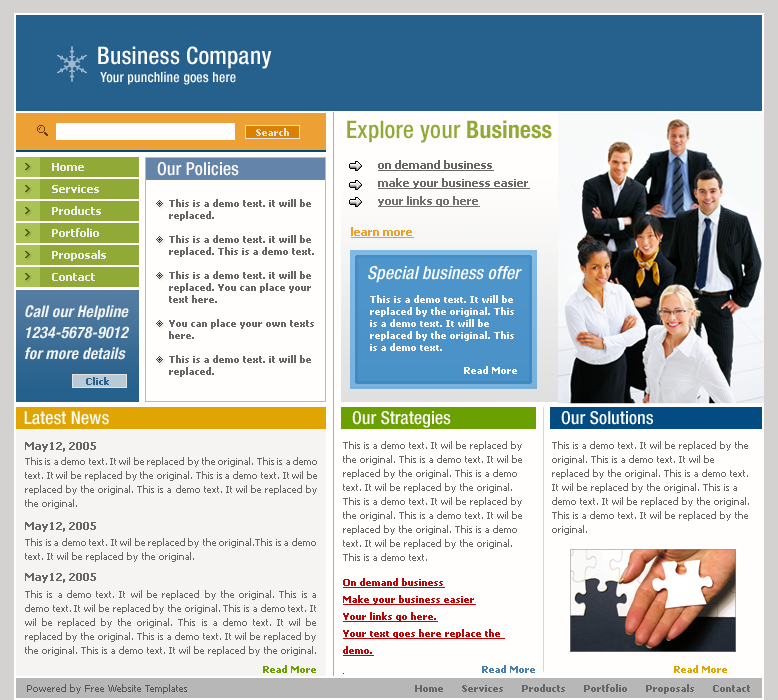
<style>
.page{position:relative;width:778px;height:700px;background:#fffefd}
.page>*{position:absolute;margin:0}
.t1{font:14px/18px "HelveticaNeue-MediumCond";color:#fffefd}
.t2{font:24px/18px "HelveticaNeue-MediumCond";color:#fffefd}
.t3{font:24px "HelveticaNeue-MediumCond";color:#91aa37}
.t4{font:24px "HelveticaNeue-BoldCond";color:#91aa37}
.t5{font:9px "Tahoma-Bold";color:#e5e4e2}
.t6{font:11px/18px "Tahoma-Bold";color:#666666;text-decoration:underline}
.t7{font:11px/22px "Tahoma-Bold";color:#efeeed}
.t8{font:18px "HelveticaNeue-MediumCond";color:#fefcfb}
.t9{font:10px/12px "Tahoma-Bold";color:#666666}
.t10{font:11px "Tahoma-Bold";color:#f09d27;text-decoration:underline}
.t11{font:18px "HelveticaNeue-MediumCondObl";color:#fffefe}
.t12{font:16px/21px "HelveticaNeue-BoldCondObl";color:#f0f2f4}
.t13{font:9px/12px "Tahoma-Bold";color:#f5f5f5}
.t14{font:10px "Tahoma-Bold";color:#fdfeff}
.t15{font:9px "Tahoma-Bold";color:#26618d}
.t16{font:18px "HelveticaNeue-MediumCond";color:#fdfcf8}
.t17{font:11px "Tahoma-Bold";color:#666666}
.t18{font:10px/14px "Tahoma";color:#666666}
.t19{font:9px/17px "Tahoma-Bold";color:#be0404;text-decoration:underline}
.t20{font:10px "Tahoma-Bold";color:#6aa100}
.t21{font:10px "Tahoma-Bold";color:#4880ab}
.t22{font:10px "Tahoma-Bold";color:#e0a403}
.t23{font:10px "Tahoma";color:#575656}
.t24{font:10px "Tahoma-Bold";color:#666666}
</style>
<div class="page">
<p class="t1" style="left:98px;top:46px;width:174px;height:39px"><span class="t2">Business Company<br></span> Your punchline goes here</p>
<p class="t3" style="left:347px;top:120px;width:205px;height:23px">Explore your <span class="t4">Business</span></p>
<p class="t5" style="left:256px;top:128px;width:33px;height:8px">Search</p>
<p class="t6" style="left:378px;top:160px;width:152px;height:47px">on demand business<br>make your business easier<br>your links go here</p>
<p class="t7" style="left:52px;top:163px;width:54px;height:118px">Home<br>Services <br>Products <br>Portfolio<br>Proposals<br>Contact</p>
<p class="t8" style="left:157px;top:162px;width:82px;height:14px">Our Policies</p>
<p class="t9" style="left:169px;top:199px;width:145px;height:178px">This is a demo text. it will be <br>replaced.<br><br>This is a demo text. it will be <br>replaced. This is a demo text.<br><br>This is a demo text. it will be <br>replaced. You can place your <br>text here.<br><br>You can place your own texts <br>here.<br><br>This is a demo text. it will be <br>replaced.</p>
<p class="t10" style="left:351px;top:227px;width:63px;height:11px">learn more</p>
<p class="t11" style="left:368px;top:266px;width:154px;height:17px">Special business offer</p>
<p class="t12" style="left:25px;top:305px;width:104px;height:55px">Call our Helpline<br>1234-5678-9012<br>for more details</p>
<p class="t13" style="left:370px;top:295px;width:144px;height:56px">This is a demo text. It will be replaced by the original. This is a demo text. It will be replaced by the original. This is a demo text.</p>
<p class="t14" style="left:464px;top:366px;width:53px;height:8px">Read More</p>
<p class="t15" style="left:86px;top:377px;width:23px;height:8px">Click</p>
<p class="t16" style="left:24px;top:411px;width:85px;height:14px">Latest News</p>
<p class="t16" style="left:352px;top:411px;width:99px;height:17px">Our Strategies</p>
<p class="t16" style="left:561px;top:411px;width:92px;height:14px">Our Solutions</p>
<p class="t17" style="left:25px;top:442px;width:71px;height:10px">May12, 2005</p>
<p class="t18" style="left:343px;top:441px;width:179px;height:120px">This is a demo text. It wil be replaced by the original. This is a demo text. It wil be replaced by the original. This is a demo text. It wil be replaced by the original. This is a demo text. It wil be replaced by the original. This is a demo text. It wil be replaced by the original. This is a demo text. It wil be replaced by the original. This is a demo text.</p>
<p class="t18" style="left:552px;top:441px;width:197px;height:94px">This is a demo text. It wil be replaced by the original. This is a demo text. It wil be replaced by the original. This is a demo text. It wil be replaced by the original. This is a demo text. It wil be replaced by the original. This is a demo text. It wil be replaced by the original.</p>
<p class="t18" style="left:25px;top:457px;width:292px;height:52px;text-align:justify">This is a demo text. It wil be replaced by the original. This is a demo text. It wil be replaced by the original. This is a demo text. It wil be replaced by the original. This is a demo text. It wil be replaced by the original.</p>
<p class="t17" style="left:25px;top:522px;width:71px;height:10px">May12, 2005</p>
<p class="t18" style="left:25px;top:538px;width:291px;height:24px;text-align:justify">This is a demo text. It wil be replaced by the original.This is a demo text. It wil be replaced by the original.</p>
<p class="t17" style="left:25px;top:573px;width:71px;height:10px">May12, 2005</p>
<p class="t19" style="left:343px;top:578px;width:162px;height:96px">On demand business<br>Make your business easier<br>Your links go here.<br>Your text goes here replace the <br>demo.</p>
<p class="t18" style="left:25px;top:590px;width:291px;height:66px;text-align:justify">This is a demo text. It wil be replaced by the original. This is a demo text. It wil be replaced by the original. This is a demo text. It wil be replaced by the original. This is a demo text. It wil be replaced by the original. This is a demo text. It wil be replaced by the original. This is a demo text. It wil be replaced by the original.</p>
<p class="t20" style="left:263px;top:665px;width:53px;height:8px">Read More</p>
<p class="t21" style="left:482px;top:665px;width:53px;height:8px">Read More</p>
<p class="t22" style="left:674px;top:665px;width:53px;height:8px">Read More</p>
<p class="t23" style="left:27px;top:684px;width:160px;height:10px">Powered by Free Website Templates</p>
<p class="t24" style="left:415px;top:684px;width:335px;height:10px">Home      Services      Products      Portfolio      Proposals      Contact</p>
</div>
